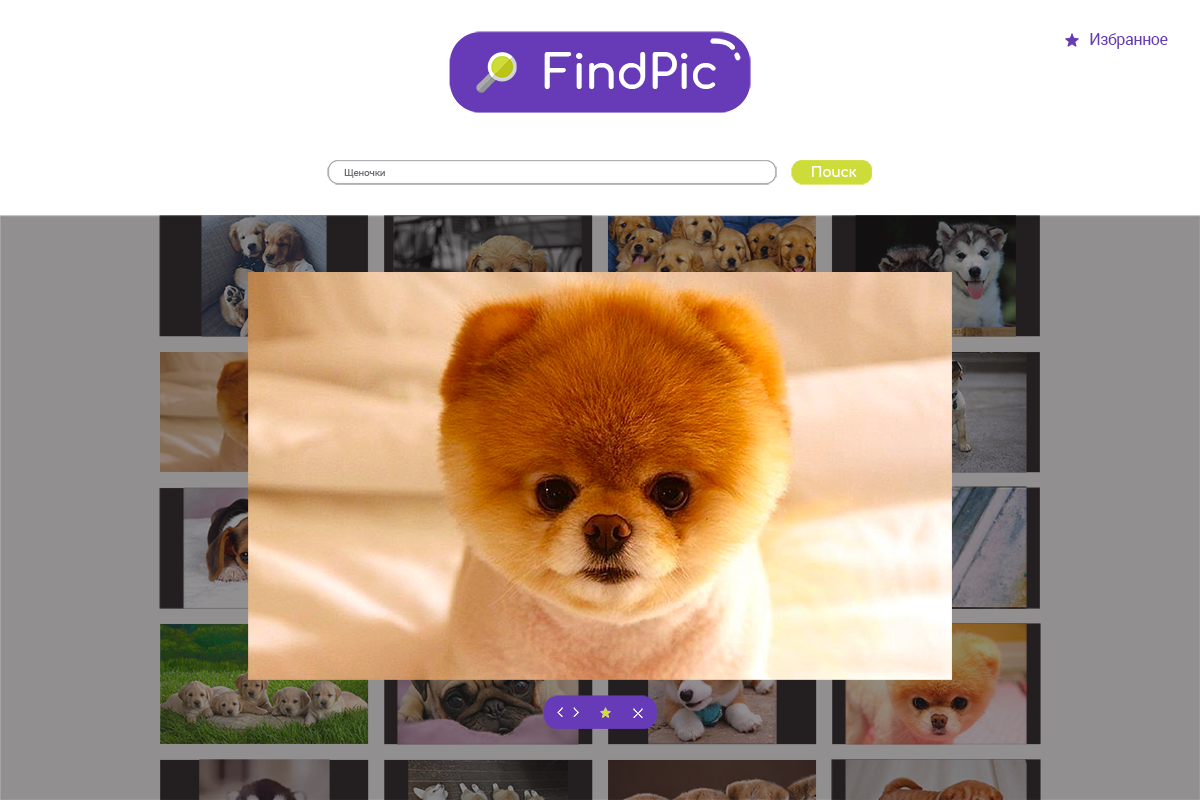
<style>
.page{position:relative;width:1200px;height:800px;background:#ffffff}
.page>*{position:absolute;margin:0}
.t1{font:16px "Roboto-Regular";letter-spacing:-0.025em;color:#673ab7}
.t2{font:10px "Roboto-Regular";letter-spacing:-0.025em;color:#6d6e71}
.t3{font:14px "Comfortaa-Bold";letter-spacing:-0.025em;color:#ffffff}
</style>
<div class="page">
<p class="t1" style="left:1090px;top:33px;width:78px;height:16px">Избранное</p>
<p class="t2" style="left:344px;top:169px;width:41px;height:9px">Щеночки</p>
<p class="t3" style="left:812px;top:166px;width:45px;height:11px">Поиск</p>
</div>
